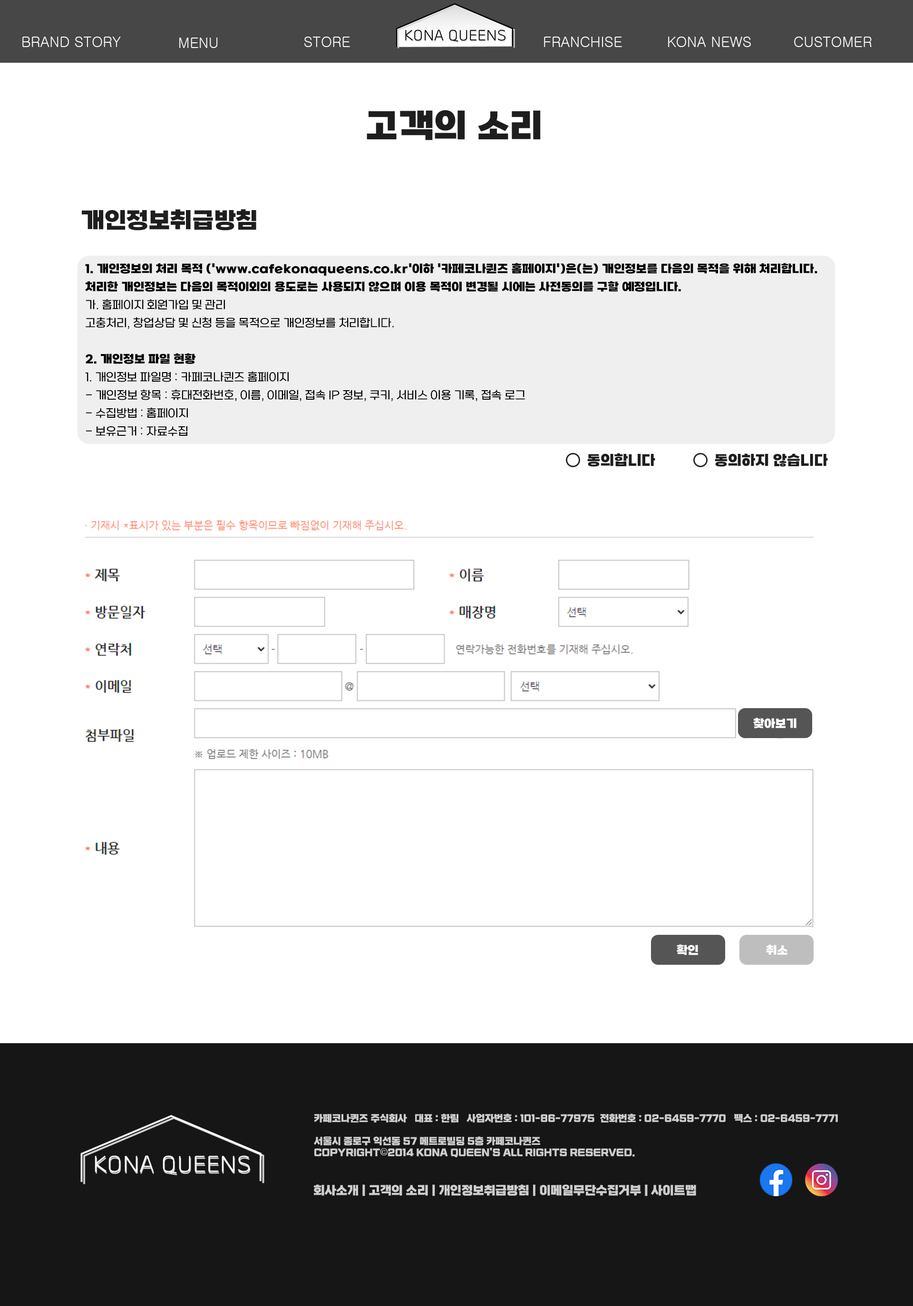
<style>
.page{position:relative;width:913px;height:1306px;background:#ffffff}
.page>*{position:absolute;margin:0}
.t1{font:14.3px "Gulim";color:#ffffff}
.t2{font:34.2px "SBAggroB";color:#1e1e1e}
.t3{font:22.8px "SBAggroB";color:#1e1e1e}
.t4{font:11.4px/18.1px "SBAggroL";color:#000000}
.t5{font:11.4px/18.1px "SBAggroB";color:#000000}
.t6{font:14.3px "SBAggroB";color:#1e1e1e}
.t7{font:11.4px "SBAggroB";color:#ffffff}
.t8{font:9.5px "esamanruBold";color:#cdcdcd}
.t9{font:9.5px "Gulim";color:#cdcdcd}
.t10{font:11.9px "esamanruBold";color:#cdcdcd}
</style>
<div class="page">
<p class="t1" style="left:22px;top:37px;width:99px;height:10px">BRAND STORY</p>
<p class="t1" style="left:179px;top:38px;width:39px;height:10px">MENU</p>
<p class="t1" style="left:304px;top:37px;width:46px;height:10px">STORE</p>
<p class="t1" style="left:544px;top:37px;width:78px;height:10px">FRANCHISE</p>
<p class="t1" style="left:668px;top:37px;width:83px;height:10px">KONA NEWS</p>
<p class="t1" style="left:794px;top:37px;width:77px;height:10px">CUSTOMER</p>
<p class="t2" style="left:367px;top:110px;width:174px;height:30px">고객의 소리</p>
<p class="t3" style="left:82px;top:209px;width:174px;height:22px">개인정보취급방침</p>
<p class="t4" style="left:85px;top:263px;width:732px;height:173px"><span class="t5">1. 개인정보의 처리 목적 ('www.cafekonaqueens.co.kr'이하 '카페코나퀸즈 홈페이지')은(는) 개인정보를 다음의 목적을 위해 처리합니다. 처리한 개인정보는 다음의 목적이외의 용도로는 사용되지 않으며 이용 목적이 변경될 시에는 사전동의를 구할 예정입니다.<br></span>가. 홈페이지 회원가입 및 관리<br>고충처리, 창업상담 및 신청 등을 목적으로 개인정보를 처리합니다.<br><br><span class="t5">2. 개인정보 파일 현황<br></span>1. 개인정보 파일명 : 카페코나퀸즈 홈페이지<br>- 개인정보 항목 : 휴대전화번호, 이름, 이메일, 접속 IP 정보, 쿠키, 서비스 이용 기록, 접속 로그<br>- 수집방법 : 홈페이지<br>- 보유근거 : 자료수집<br>- 보유기간 : 3년<br>- 관련법령 : 소비자의 불만 또는 분쟁처리에 관한 기록 : 3년, 신용정보의 수집/처리 및 이용 등에 관한 기록 : 3년</p>
<p class="t6" style="left:587px;top:454px;width:68px;height:13px">동의합니다</p>
<p class="t6" style="left:715px;top:454px;width:113px;height:13px">동의하지 않습니다</p>
<p class="t7" style="left:753px;top:718px;width:43px;height:11px">찾아보기</p>
<p class="t7" style="left:676px;top:945px;width:22px;height:11px">확인</p>
<p class="t7" style="left:766px;top:945px;width:22px;height:10px">취소</p>
<p class="t8" style="left:314px;top:1114px;width:524px;height:44px">카페코나퀸즈 주식회사   대표 : 한림   사업자번호 : 101-86-77975  전화번호 : 02-6459-7770   팩스 : 02-6459-7771<br><br>서울시 종로구 익선동 57 메트로빌딩 5층 카페코나퀸즈<br>COPYRIGHT<span class="t9">©</span>2014 KONA QUEEN'S ALL RIGHTS RESERVED.</p>
<p class="t10" style="left:314px;top:1185px;width:382px;height:12px">회사소개 | 고객의 소리 | 개인정보취급방침 | 이메일무단수집거부 | 사이트맵</p>
</div>
